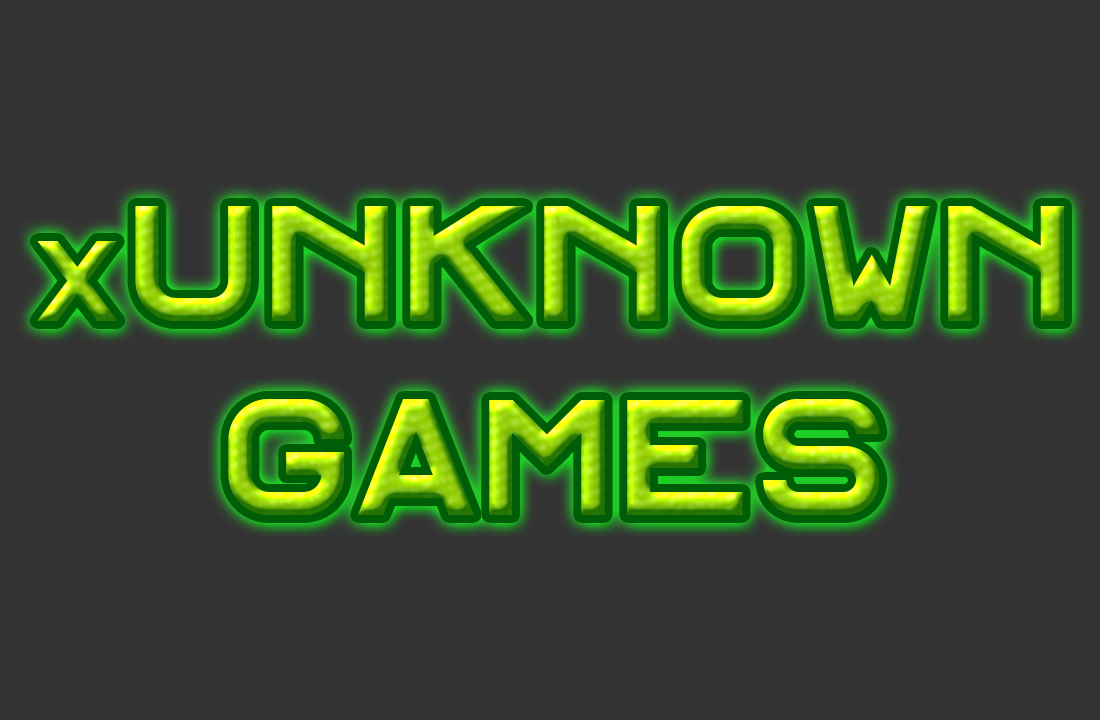
<style>
.page{position:relative;width:1100px;height:720px;background:#333333}
.page>*{position:absolute;margin:0}
.t1{font:161.9px "Alfphabet-IV"}
.t2{font:112.4px "Alfphabet-IV"}
</style>
<div class="page">
<p class="t1" style="left:37px;top:206px;width:1028px;height:309px;text-align:center"><span class="t2">x</span>Unknown<br>Games</p>
</div>
